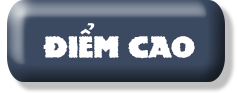
<style>
.page{position:relative;width:237px;height:94px;background:#3b4a61}
.page>*{position:absolute;margin:0}
.t1{font:30px "Rockstone";color:#ffffff}
</style>
<div class="page">
<p class="t1" style="left:43px;top:23px;width:152px;height:36px">Điểm cao</p>
</div>
